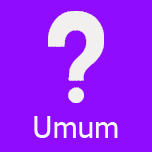
<style>
.page{position:relative;width:152px;height:152px;background:#900cfe}
.page>*{position:absolute;margin:0}
.t1{font:30px "Tahoma";color:#f8f9fc}
</style>
<div class="page">
<p class="t1" style="left:34px;top:116px;width:84px;height:22px">Umum</p>
</div>
